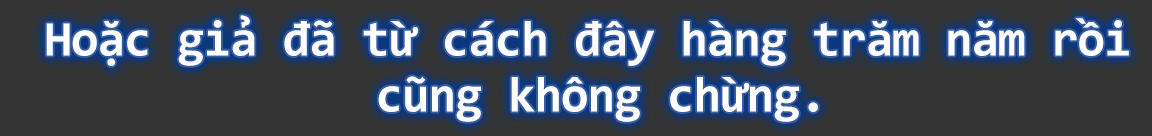
<style>
.page{position:relative;width:1152px;height:136px;background:#333333}
.page>*{position:absolute;margin:0}
.t1{font:50px/48px "Consolas-Bold";letter-spacing:-0.02em;color:#fefefe}
</style>
<div class="page">
<p class="t1" style="left:46px;top:15px;width:1083px;height:107px;text-align:center">Hoặc giả đã từ cách đây hàng trăm năm rồi<br> cũng không chừng.</p>
</div>
